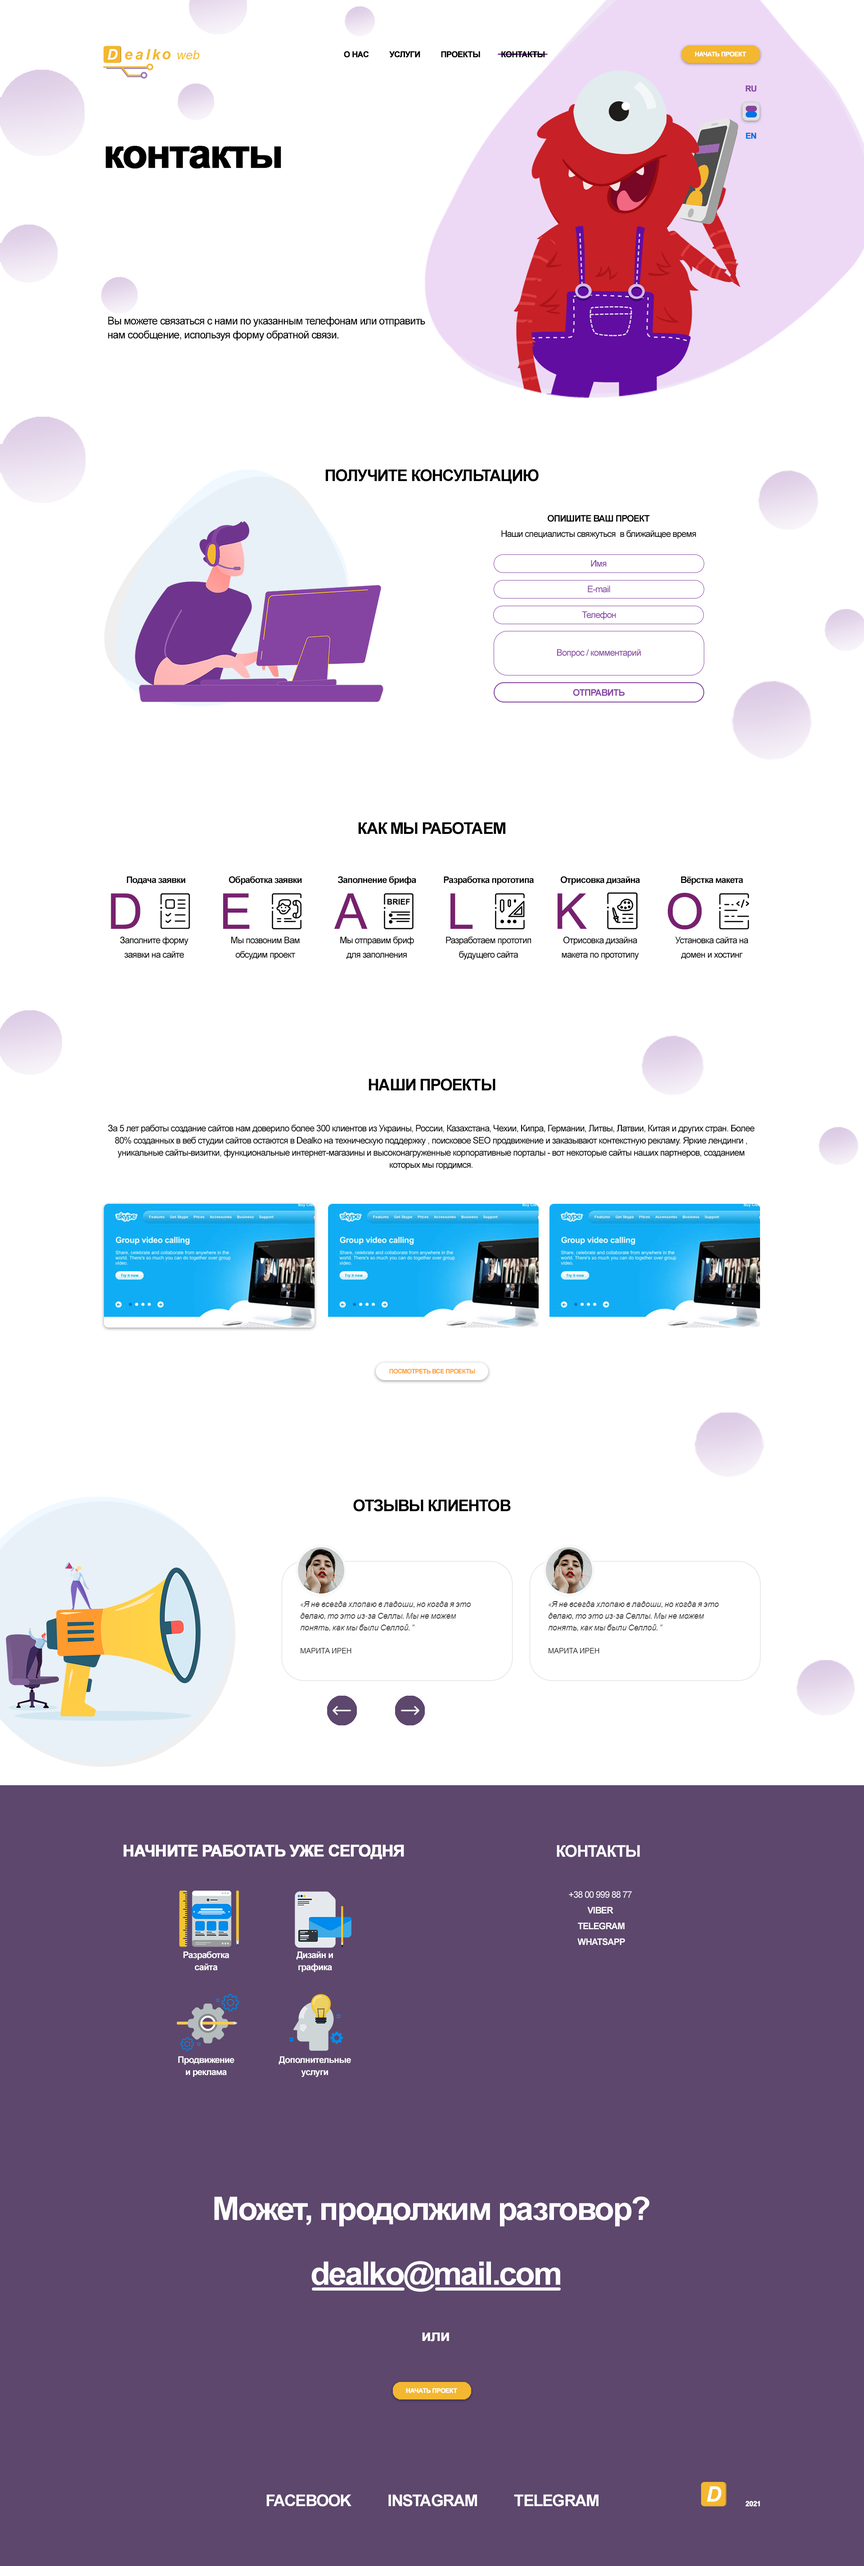
<style>
.page{position:relative;width:864px;height:2566px;background:#ffffff}
.page>*{position:absolute;margin:0}
.t1{font:8.1px "Arial-BoldMT";letter-spacing:-0.05em;color:#000000;font-weight:bold}
.t2{font:6.3px "Arial-BoldMT";letter-spacing:-0.05em;color:#ffffff;font-weight:bold}
.t3{font:8.1px "Arial-BoldMT";letter-spacing:-0.05em;color:#8544a2;font-weight:bold}
.t4{font:8.1px "Arial-BoldMT";letter-spacing:-0.05em;color:#0071e3;font-weight:bold}
.t5{font:40.5px "Arial-BoldMT";letter-spacing:-0.05em;color:#000000;font-weight:bold}
.t6{font:10.8px/14px "ArialMT";letter-spacing:-0.05em;color:#000000}
.t7{font:16.2px "Arial-BoldMT";letter-spacing:-0.05em;color:#000000}
.t8{font:9px "Arial-BoldMT";letter-spacing:-0.05em;color:#000000}
.t9{font:9px "ArialMT";letter-spacing:-0.05em;color:#000000}
.t10{font:9px "ArialMT";letter-spacing:-0.05em;color:#8544a2}
.t11{font:9px "Arial-BoldMT";letter-spacing:-0.05em;color:#8544a2}
.t12{font:49.5px "ArialMT";letter-spacing:-0.05em;color:#77216f}
.t13{font:9px/14.4px "ArialMT";letter-spacing:-0.05em;color:#000000}
.t14{font:9px/12.2px "ArialMT";letter-spacing:-0.05em;color:#000000}
.t15{font:6.3px "Arial-BoldMT";letter-spacing:-0.05em;color:#ff9a2e}
.t16{font:16.2px "Arial-BoldMT";letter-spacing:-0.05em;color:#ffffff;font-weight:bold}
.t17{font:16.2px "Arial-BoldMT";letter-spacing:-0.05em;color:#ffffff}
.t18{font:9px/15.8px "Arial-BoldMT";letter-spacing:-0.05em;color:#fefefe}
.t19{font:9px/15.8px "ArialMT";letter-spacing:-0.05em;color:#fefefe}
.t20{font:9px/12.2px "Arial-BoldMT";letter-spacing:-0.05em;color:#ffffff}
.t21{font:32.4px "Arial-BoldMT";letter-spacing:-0.05em;color:#fefefe}
.t22{font:16.2px "Arial-BoldMT";letter-spacing:-0.05em;color:#fefefe}
.t23{font:7.2px "Arial-BoldMT";letter-spacing:-0.05em;color:#ffffff;font-weight:bold}
</style>
<div class="page">
<p class="t1" style="left:344px;top:51px;width:201px;height:7px">О НАС          УСЛУГИ          ПРОЕКТЫ          КОНТАКТЫ</p>
<p class="t2" style="left:695px;top:51px;width:51px;height:6px">НАЧАТЬ ПРОЕКТ</p>
<p class="t3" style="left:746px;top:86px;width:10px;height:6px">RU</p>
<p class="t4" style="left:746px;top:133px;width:10px;height:6px">EN</p>
<p class="t5" style="left:106px;top:146px;width:175px;height:23px">контакты</p>
<p class="t6" style="left:108px;top:316px;width:317px;height:25px">Вы можете связаться с нами по указанным телефонам или отправить нам сообщение, используя форму обратной связи.</p>
<p class="t7" style="left:325px;top:469px;width:214px;height:15px">ПОЛУЧИТЕ КОНСУЛЬТАЦИЮ</p>
<p class="t8" style="left:548px;top:515px;width:102px;height:7px">ОПИШИТЕ ВАШ ПРОЕКТ</p>
<p class="t9" style="left:501px;top:530px;width:195px;height:9px">Наши специалисты свяжуться  в ближайщее время</p>
<p class="t10" style="left:591px;top:560px;width:16px;height:7px">Имя</p>
<p class="t10" style="left:588px;top:585px;width:22px;height:8px">E-mail</p>
<p class="t10" style="left:582px;top:611px;width:34px;height:9px">Телефон</p>
<p class="t10" style="left:557px;top:649px;width:84px;height:8px">Вопрос / комментарий</p>
<p class="t11" style="left:573px;top:689px;width:52px;height:7px">ОТПРАВИТЬ</p>
<p class="t7" style="left:358px;top:822px;width:147px;height:12px">КАК МЫ РАБОТАЕМ</p>
<p class="t8" style="left:127px;top:876px;width:58px;height:8px">Подача заявки</p>
<p class="t8" style="left:229px;top:876px;width:73px;height:9px">Обработка заявки</p>
<p class="t8" style="left:338px;top:876px;width:78px;height:9px">Заполнение брифа</p>
<p class="t8" style="left:444px;top:876px;width:90px;height:9px">Разработка прототипа</p>
<p class="t8" style="left:561px;top:876px;width:79px;height:9px">Отрисовка дизайна</p>
<p class="t8" style="left:681px;top:876px;width:62px;height:9px">Вёрстка макета</p>
<p class="t12" style="left:111px;top:893px;width:29px;height:36px">D</p>
<p class="t12" style="left:223px;top:893px;width:27px;height:36px">E</p>
<p class="t12" style="left:334px;top:893px;width:34px;height:36px">A</p>
<p class="t12" style="left:450px;top:893px;width:23px;height:36px">L</p>
<p class="t12" style="left:558px;top:893px;width:29px;height:36px">K</p>
<p class="t12" style="left:667px;top:893px;width:35px;height:37px">O</p>
<p class="t13" style="left:120px;top:936px;width:69px;height:22px;text-align:center">Заполните форму<br>заявки на сайте</p>
<p class="t13" style="left:231px;top:936px;width:69px;height:24px;text-align:center">Мы позвоним Вам<br>обсудим проект</p>
<p class="t13" style="left:340px;top:936px;width:74px;height:23px;text-align:center">Мы отправим бриф<br>для заполнения</p>
<p class="t13" style="left:446px;top:936px;width:85px;height:24px;text-align:center">Разработаем прототип<br>будущего сайта</p>
<p class="t13" style="left:562px;top:936px;width:77px;height:24px;text-align:center">Отрисовка дизайна<br>макета по прототипу</p>
<p class="t13" style="left:675px;top:936px;width:73px;height:23px;text-align:center">Установка сайта на<br>домен и хостинг</p>
<p class="t7" style="left:369px;top:1078px;width:126px;height:13px">НАШИ ПРОЕКТЫ</p>
<p class="t14" style="left:108px;top:1125px;width:647px;height:45px;text-align:center">За 5 лет работы создание сайтов нам доверило более 300 клиентов из Украины, России, Казахстана, Чехии, Кипра, Германии, Литвы, Латвии, Китая и других стран. Более 80% созданных в веб студии сайтов остаются в Dealko на техническую поддержку , поисковое SEO продвижение и заказывают контекстную рекламу. Яркие лендинги , уникальные сайты-визитки, функциональные интернет-магазины и высоконагруженные корпоративные порталы - вот некоторые сайты наших партнеров, созданием которых мы гордимся.</p>
<p class="t15" style="left:389px;top:1368px;width:86px;height:6px">ПОСМОТРЕТЬ ВСЕ ПРОЕКТЫ</p>
<p class="t7" style="left:353px;top:1499px;width:158px;height:13px">ОТЗЫВЫ КЛИЕНТОВ</p>
<p class="t16" style="left:123px;top:1844px;width:281px;height:15px">НАЧНИТЕ РАБОТАТЬ УЖЕ СЕГОДНЯ</p>
<p class="t17" style="left:557px;top:1845px;width:83px;height:12px">КОНТАКТЫ</p>
<p class="t18" style="left:569px;top:1891px;width:63px;height:54px;text-align:center"><span class="t19">+38 00 999 88 77 <br></span>VIBER <br>TELEGRAM<br>WHATSAPP</p>
<p class="t20" style="left:183px;top:1951px;width:47px;height:20px;text-align:center">Разработка<br>сайта</p>
<p class="t20" style="left:296px;top:1951px;width:37px;height:21px;text-align:center">Дизайн и<br>графика</p>
<p class="t20" style="left:178px;top:2056px;width:56px;height:21px;text-align:center">Продвижение<br>и реклама</p>
<p class="t20" style="left:279px;top:2056px;width:72px;height:21px;text-align:center">Дополнительные<br>услуги</p>
<p class="t21" style="left:214px;top:2196px;width:435px;height:31px">Может, продолжим разговор?</p>
<p class="t21" style="left:311px;top:2261px;width:249px;height:31px">dealko@mail.com</p>
<p class="t22" style="left:422px;top:2332px;width:27px;height:9px">или</p>
<p class="t2" style="left:406px;top:2388px;width:51px;height:5px">НАЧАТЬ ПРОЕКТ</p>
<p class="t22" style="left:266px;top:2494px;width:332px;height:12px">FACEBOOK          INSTAGRAM          TELEGRAM</p>
<p class="t23" style="left:745px;top:2501px;width:15px;height:5px">2021</p>
</div>
